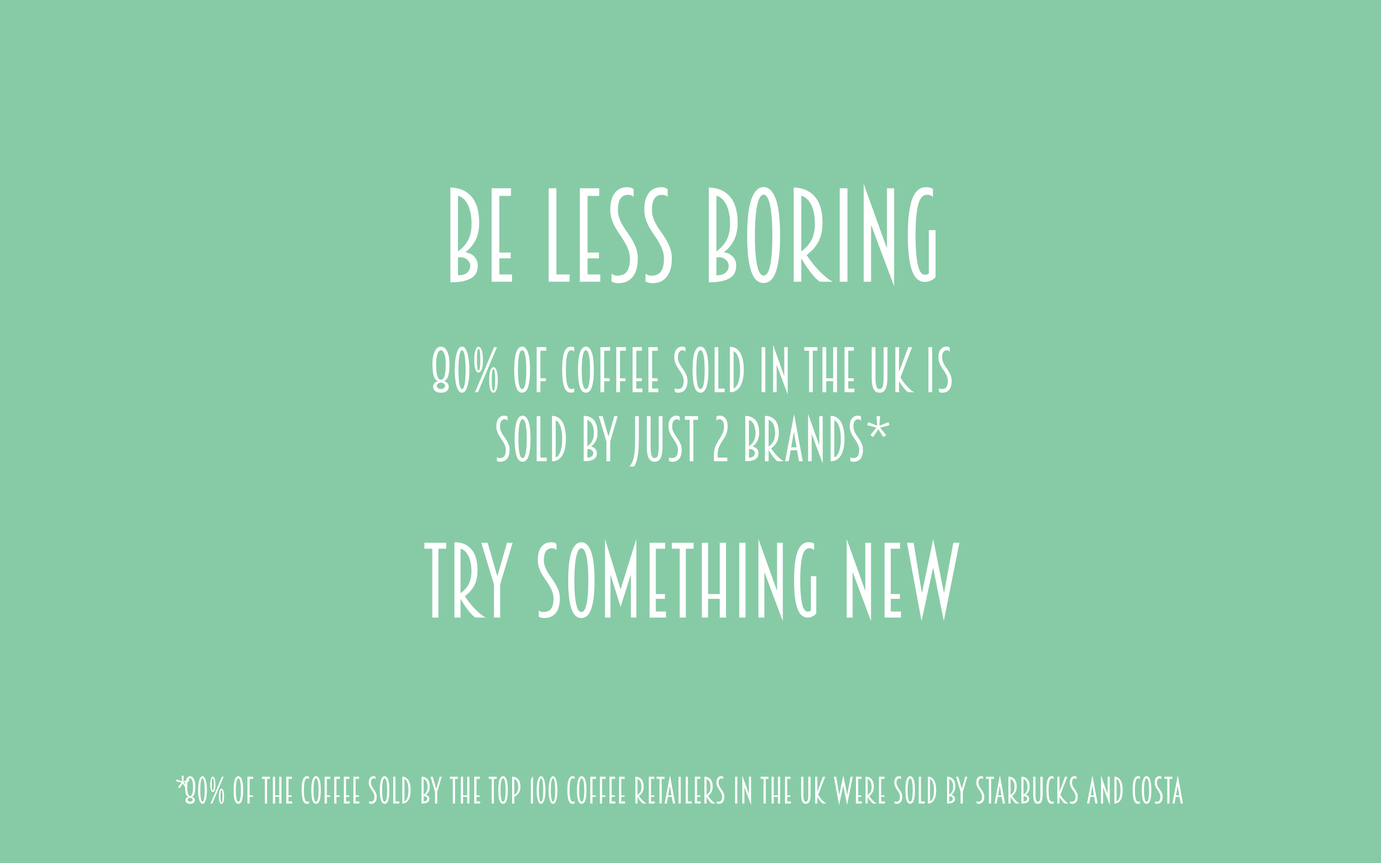
<style>
.page{position:relative;width:1381px;height:863px;background:#87cba6}
.page>*{position:absolute;margin:0}
.t1{font:57.6px "Breamcatcher-Regular";color:#ffffff}
.t2{font:119.9px "Breamcatcher-Regular";color:#ffffff}
.t3{font:95.9px "Breamcatcher-Regular";color:#ffffff}
.t4{font:34.5px "Breamcatcher-Regular";color:#ffffff}
</style>
<div class="page">
<p class="t1" style="left:424px;top:184px;width:536px;height:438px;text-align:center"><span class="t2">Be less boring<br> <br></span>80% of coffee sold in the UK is<br>sold by just 2 brands*<br> <br><span class="t3">try something new</span></p>
<p class="t4" style="left:176px;top:776px;width:13px;height:12px">*</p>
<p class="t4" style="left:185px;top:776px;width:998px;height:29px">80% of the coffee sold by the top 100 coffee retailers in the uk were sold by starbucks and costa</p>
</div>
